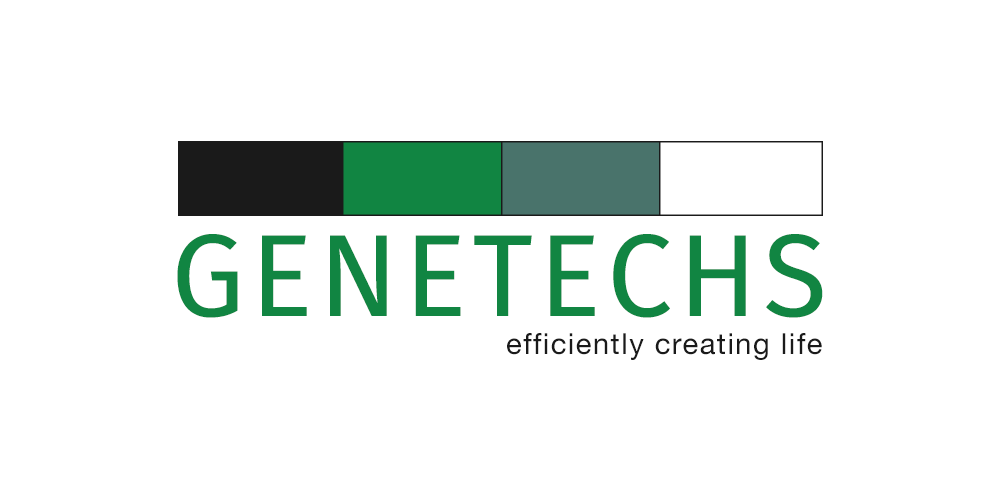
<style>
.page{position:relative;width:1000px;height:500px;background:#ffffff}
.page>*{position:absolute;margin:0}
.t1{font:116.7px "FiraSans-Regular";letter-spacing:0.05em;color:#118542;text-transform:uppercase}
.t2{font:29.2px "HelveticaNeue";letter-spacing:0.05em;color:#1a1a1a}
</style>
<div class="page">
<p class="t1" style="left:177px;top:234px;width:646px;height:84px">genetechs</p>
<p class="t2" style="left:507px;top:333px;width:315px;height:27px">efficiently creating life</p>
</div>
